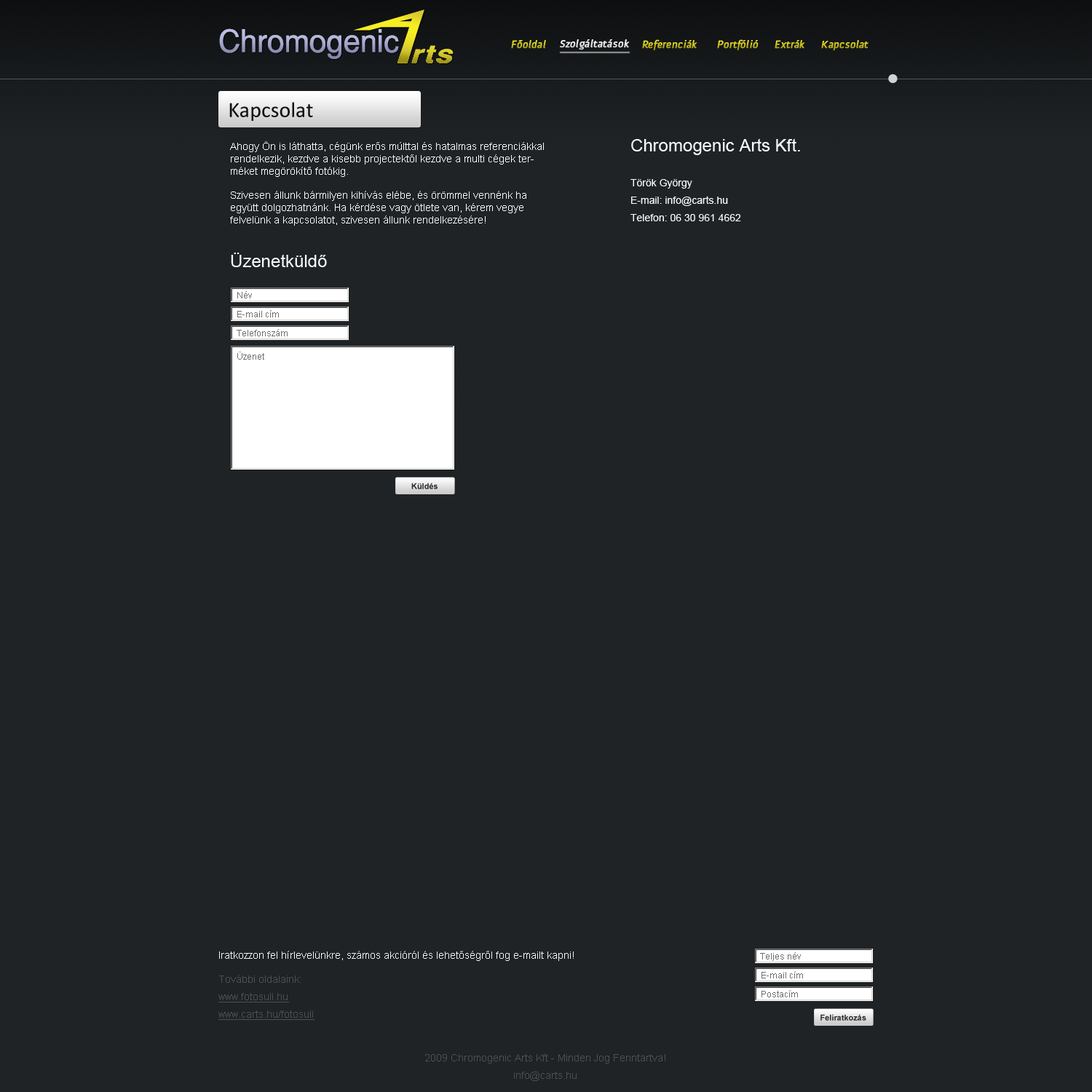
<style>
.page{position:relative;width:1092px;height:1092px;background:#1f2326}
.page>*{position:absolute;margin:0}
.t1{font:10.9px "Anivers-Regular";font-weight:bold;font-style:italic}
.t2{font:10.9px "Anivers-Regular";color:#e4e4e4;font-weight:bold;font-style:italic}
.t3{font:21.8px "Calibri";color:#101316}
.t4{font:10.2px "ArialMT";color:#f9f9f9}
.t5{font:10.2px/17.5px "ArialMT";color:#f9f9f9}
.t6{font:17.5px/17.5px "ArialMT";color:#f9f9f9}
.t7{font:17.5px "ArialMT";color:#f9f9f9}
.t8{font:8.7px "ArialMT";color:#6e6e6e}
.t9{font:8px "Arial-BoldMT";color:#282828}
.t10{font:10.2px "ArialMT";color:#f1f1f1}
.t11{font:10.2px/17.5px "ArialMT";color:#4f4f4f;text-decoration:underline}
.t12{font:10.2px/17.5px "ArialMT";color:#4f4f4f}
</style>
<div class="page">
<p class="t1" style="left:511px;top:39px;width:357px;height:12px">Főoldal                             Referenciák      Portfólió     Extrák     Kapcsolat</p>
<p class="t2" style="left:559px;top:39px;width:71px;height:11px">Szolgáltatások</p>
<p class="t3" style="left:229px;top:102px;width:84px;height:19px">Kapcsolat</p>
<p class="t4" style="left:230px;top:141px;width:314px;height:85px">Ahogy Ön is láthatta, cégünk erős múlttal és hatalmas referenciákkal rendelkezik, kezdve a kisebb projectektől kezdve a multi cégek terméket megörökítő fotókig. <br><br>Szivesen állunk bármilyen kihívás elébe, és örömmel vennénk ha együtt dolgozhatnánk. Ha kérdése vagy ötlete van, kérem vegye felvelünk a kapcsolatot, szivesen állunk rendelkezésére!</p>
<p class="t5" style="left:630px;top:138px;width:170px;height:83px"><span class="t6">Chromogenic Arts Kft.<br></span><br>Török György<br>E-mail: info@carts.hu<br>Telefon: 06 30 961 4662</p>
<p class="t7" style="left:231px;top:253px;width:96px;height:14px">Üzenetküldő</p>
<p class="t8" style="left:237px;top:291px;width:15px;height:7px">Név</p>
<p class="t8" style="left:237px;top:310px;width:42px;height:7px">E-mail cím</p>
<p class="t8" style="left:237px;top:329px;width:51px;height:7px">Telefonszám</p>
<p class="t8" style="left:237px;top:352px;width:27px;height:8px">Üzenet</p>
<p class="t9" style="left:411px;top:483px;width:27px;height:6px">Küldés</p>
<p class="t10" style="left:219px;top:951px;width:355px;height:10px">Iratkozzon fel hírlevelünkre, számos akcióról és lehetőségről fog e-mailt kapni!</p>
<p class="t8" style="left:760px;top:952px;width:41px;height:9px">Teljes név</p>
<p class="t11" style="left:218px;top:975px;width:96px;height:45px"><span class="t12">További oldalaink:<br></span>www.fotosuli.hu<br>www.carts.hu/fotosuli</p>
<p class="t8" style="left:761px;top:971px;width:42px;height:7px">E-mail cím</p>
<p class="t8" style="left:761px;top:990px;width:37px;height:7px">Postacím</p>
<p class="t9" style="left:820px;top:1014px;width:46px;height:7px">Feliratkozás</p>
<p class="t12" style="left:425px;top:1054px;width:240px;height:27px;text-align:center">2009 Chromogenic Arts Kft - Minden Jog Fenntartva!<br>info@carts.hu</p>
</div>
